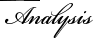
<style>
.page{position:relative;width:102px;height:40px;background:#ffffff}
.page>*{position:absolute;margin:0}
.t1{font:36px "BickhamScriptPro-Regular";color:#000000}
</style>
<div class="page">
<p class="t1" style="left:5px;top:3px;width:88px;height:35px">Analysis</p>
</div>
